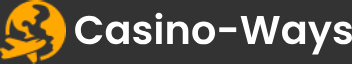
<style>
.page{position:relative;width:352px;height:64px;background:#333333}
.page>*{position:absolute;margin:0}
.t1{font:40px "Poppins-SemiBold";color:#ffffff}
</style>
<div class="page">
<p class="t1" style="left:75px;top:12px;width:277px;height:43px">Casino-Ways</p>
</div>
